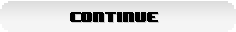
<style>
.page{position:relative;width:236px;height:32px;background:#f5f5f5}
.page>*{position:absolute;margin:0}
.t1{font:12px "8BITWONDERNominal";color:#000000;font-weight:bold}
</style>
<div class="page">
<p class="t1" style="left:70px;top:12px;width:88px;height:10px">Continue</p>
</div>
